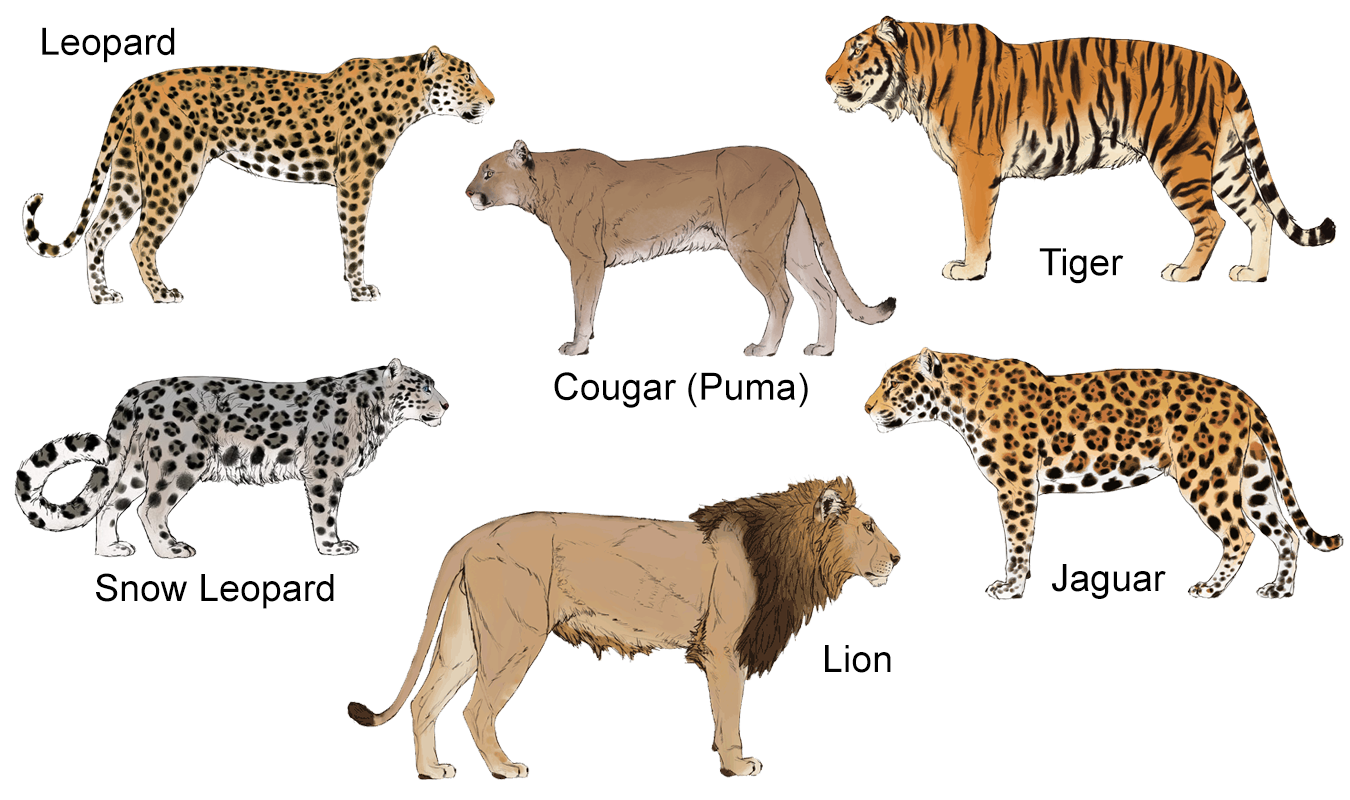
<style>
.page{position:relative;width:1350px;height:800px;background:#ffffff}
.page>*{position:absolute;margin:0}
.t1{font:37.5px "ArialMT";color:#000000}
</style>
<div class="page">
<p class="t1" style="left:42px;top:27px;width:133px;height:36px">Leopard</p>
<p class="t1" style="left:1039px;top:248px;width:85px;height:36px">Tiger</p>
<p class="t1" style="left:554px;top:372px;width:254px;height:36px">Cougar (Puma)</p>
<p class="t1" style="left:1052px;top:564px;width:114px;height:35px">Jaguar</p>
<p class="t1" style="left:96px;top:573px;width:238px;height:36px">Snow Leopard</p>
<p class="t1" style="left:825px;top:645px;width:66px;height:28px">Lion</p>
</div>
